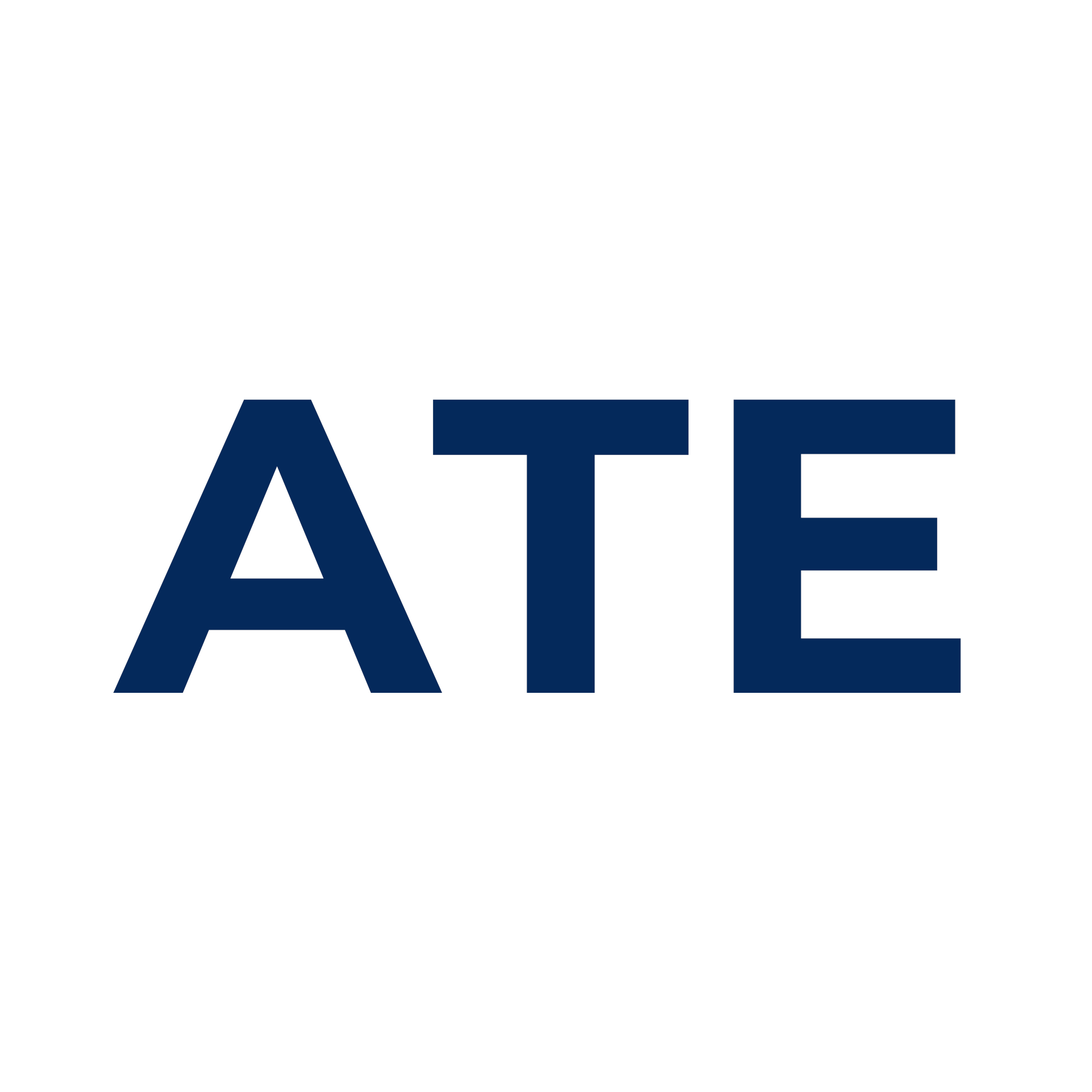
<style>
.page{position:relative;width:1092px;height:1092px;background:#ffffff}
.page>*{position:absolute;margin:0}
.t1{font:418.8px "Montserrat-Bold";letter-spacing:0.02em;color:#04295b;text-transform:uppercase}
</style>
<div class="page">
<p class="t1" style="left:113px;top:399px;width:848px;height:294px">ATE</p>
</div>
